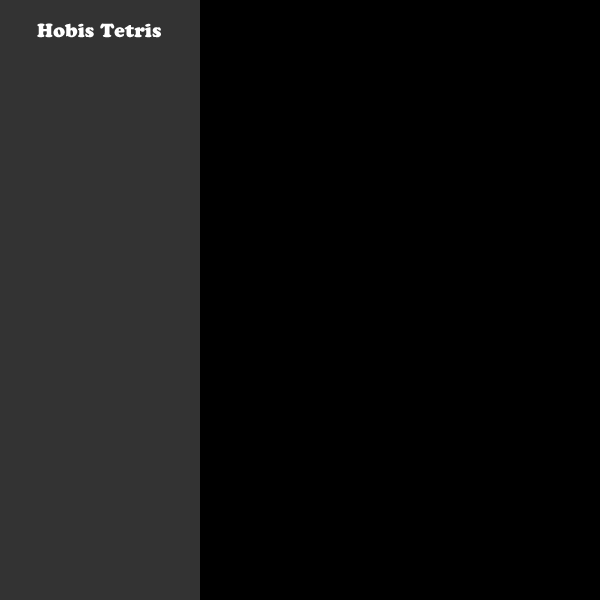
<style>
.page{position:relative;width:600px;height:600px;background:#000000}
.page>*{position:absolute;margin:0}
.t1{font:19px "CooperBlackStd";color:#ffffff}
</style>
<div class="page">
<p class="t1" style="left:37px;top:23px;width:124px;height:15px">Hobis Tetris</p>
</div>
